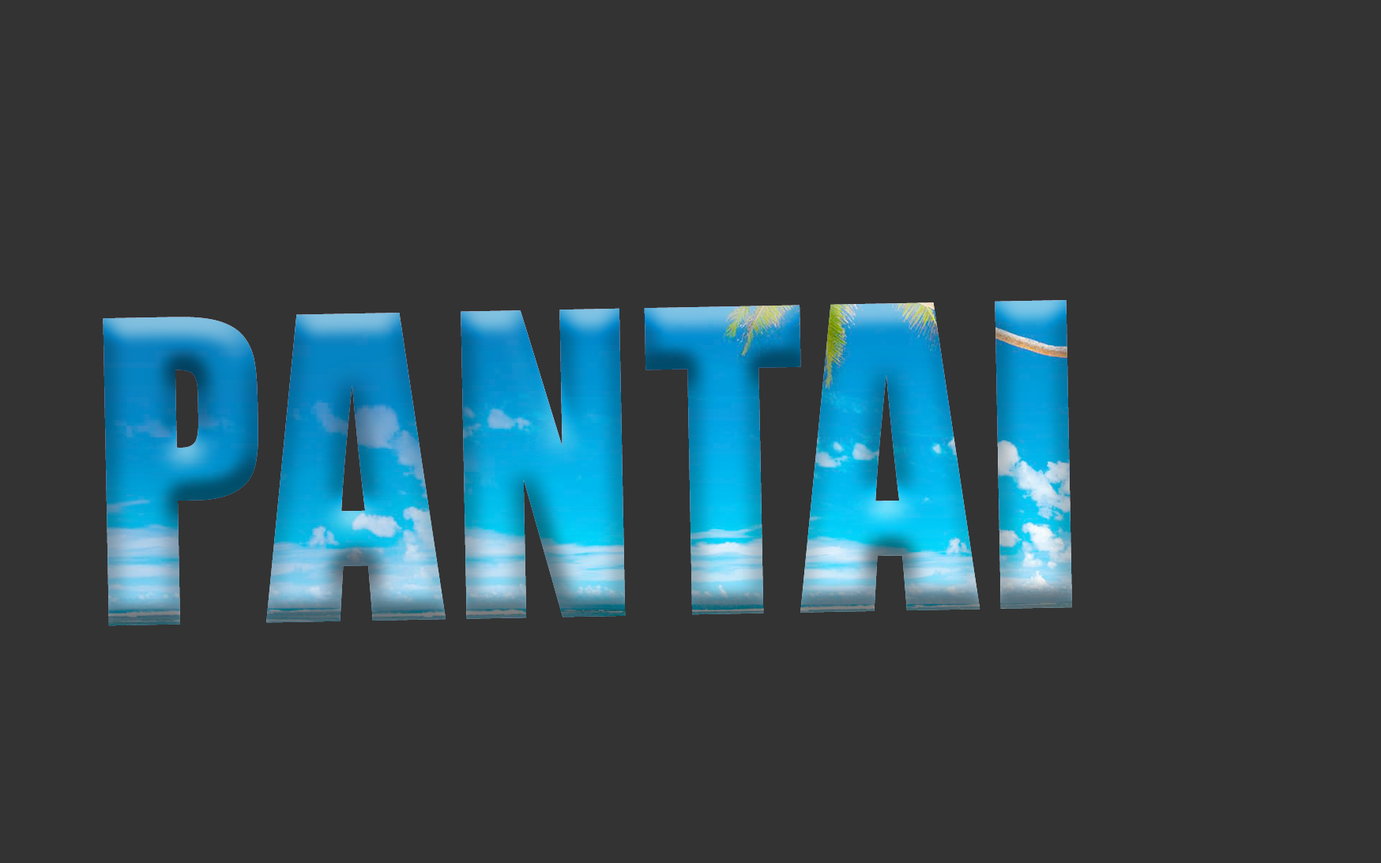
<style>
.page{position:relative;width:1381px;height:863px;background:#333333}
.page>*{position:absolute;margin:0}
.t1{font:388.4px "Impact";font-weight:bold;scale:0.89 1}
</style>
<div class="page">
<p class="t1" style="left:103px;top:300px;width:969px;height:326px;rotate:-1deg">PANTAI</p>
</div>
